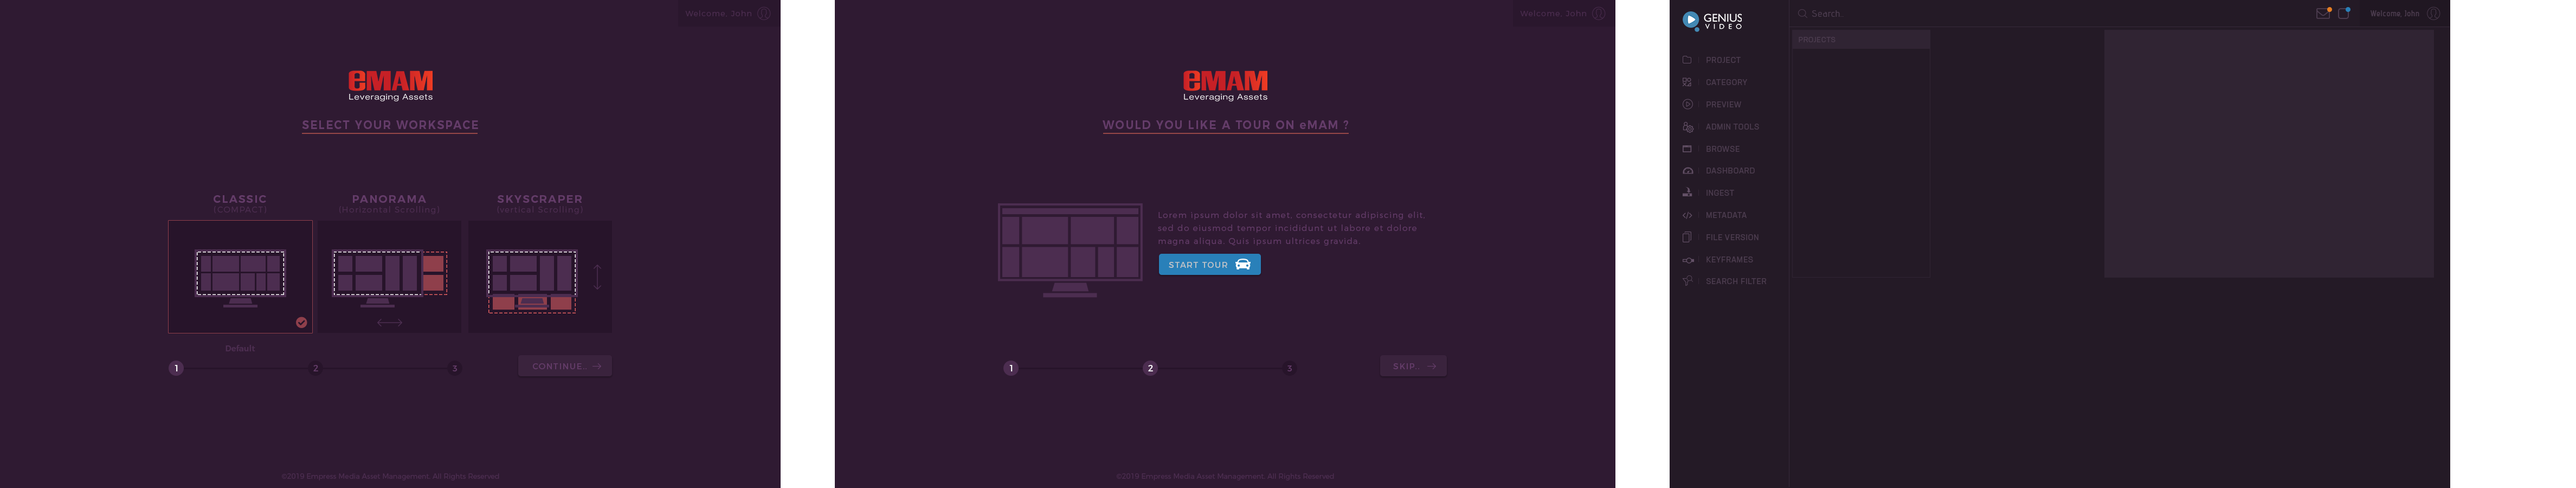
<style>
.page{position:relative;width:2576px;height:488px;background:#2f1a32}
.page>*{position:absolute;margin:0}
.t1{font:7.6px "Montserrat-Light";letter-spacing:0.1em;color:#4c2d50}
.t2{font:9.8px "AdventPro-Medium";letter-spacing:0.06em;color:#4c3c4f}
.t3{font:8.1px "AdventPro-SemiBold";letter-spacing:0.04em;color:#4c3c4f}
.t4{font:7.6px "NeusaNextStd-Regular";letter-spacing:0.04em;color:#4c3c4f;text-transform:uppercase}
.t5{font:8.1px/22.1px "NeusaNextStd-Regular";letter-spacing:0.04em;color:#4c3c4f;text-transform:uppercase}
.t6{font:11.9px "Montserrat-SemiBold";letter-spacing:0.1em;color:#643c69;text-transform:uppercase;scale:0.92 1}
.t7{font:11.9px "Montserrat-SemiBold";letter-spacing:0.1em;color:#643c69;scale:0.92 1}
.t8{font:8.1px "Montserrat-Light";letter-spacing:0.1em;color:#4c2d50;text-transform:uppercase}
.t9{font:10.8px "Montserrat-SemiBold";letter-spacing:0.1em;color:#643c69;text-transform:uppercase}
.t10{font:8.1px "Montserrat-Light";letter-spacing:0.1em;color:#4c2d50}
.t11{font:8.1px/13px "Montserrat-Light";letter-spacing:0.1em;color:#643c69}
.t12{font:8.1px "Montserrat-Regular";letter-spacing:0.1em;color:#bdc3c7;text-transform:uppercase}
.t13{font:8.1px "Montserrat-SemiBold";color:#4c2d50}
.t14{font:8.7px "Montserrat-Regular";letter-spacing:0.1em;color:#ffffff;text-transform:uppercase}
.t15{font:8.7px "Montserrat-Regular";letter-spacing:0.1em;color:#643c69;text-transform:uppercase}
.t16{font:8.1px "Montserrat-Regular";letter-spacing:0.1em;color:#643c69;text-transform:uppercase}
.t17{font:7px "Montserrat-Light";color:#4c2d50}
</style>
<div class="page">
<p class="t1" style="left:685px;top:10px;width:66px;height:7px">Welcome, John</p>
<p class="t1" style="left:1520px;top:10px;width:66px;height:7px">Welcome, John</p>
<p class="t2" style="left:1812px;top:10px;width:32px;height:7px">Search..</p>
<p class="t3" style="left:2371px;top:10px;width:48px;height:7px">Welcome, John</p>
<p class="t4" style="left:1799px;top:37px;width:37px;height:5px">Projects</p>
<p class="t5" style="left:1706px;top:57px;width:60px;height:227px">Project<br>Category<br>Preview<br>Admin Tools<br>Browse<br>Dashboard<br>ingest<br>Metadata<br>File version<br>Keyframes<br>Search Filter</p>
<p class="t6" style="left:302px;top:120px;width:176px;height:9px">Select your workspace</p>
<p class="t6" style="left:1103px;top:120px;width:245px;height:9px">Would you like a tour on <span class="t7">e</span>MAM ?</p>
<p class="t8" style="left:214px;top:195px;width:52px;height:19px;text-align:center"><span class="t9">Classic<br></span>(Compact)</p>
<p class="t10" style="left:339px;top:195px;width:100px;height:19px;text-align:center"><span class="t9">Panorama<br></span>(Horizontal Scrolling)</p>
<p class="t10" style="left:497px;top:195px;width:86px;height:19px;text-align:center"><span class="t9">Skyscraper<br></span><span class="t8">(</span>vertical Scrolling<span class="t8">)</span></p>
<p class="t11" style="left:1158px;top:211px;width:267px;height:35px">Lorem ipsum dolor sit amet, consectetur adipiscing elit, sed do eiusmod tempor incididunt ut labore et dolore magna aliqua. Quis ipsum ultrices gravida.</p>
<p class="t12" style="left:1169px;top:262px;width:58px;height:6px">Start Tour</p>
<p class="t13" style="left:226px;top:345px;width:29px;height:6px">Default</p>
<p class="t14" style="left:175px;top:365px;width:3px;height:6px">1</p>
<p class="t15" style="left:313px;top:365px;width:5px;height:6px">2</p>
<p class="t15" style="left:453px;top:365px;width:5px;height:6px">3</p>
<p class="t16" style="left:533px;top:363px;width:54px;height:6px">Continue..</p>
<p class="t14" style="left:1009px;top:365px;width:4px;height:6px">1</p>
<p class="t14" style="left:1148px;top:365px;width:5px;height:6px">2</p>
<p class="t15" style="left:1287px;top:365px;width:5px;height:6px">3</p>
<p class="t16" style="left:1393px;top:363px;width:26px;height:6px">Skip..</p>
<p class="t17" style="left:282px;top:473px;width:217px;height:7px">©2019 Empress Media Asset Management. All Rights Reserved</p>
<p class="t17" style="left:1117px;top:473px;width:217px;height:7px">©2019 Empress Media Asset Management. All Rights Reserved</p>
</div>
